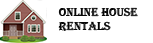
<style>
.page{position:relative;width:153px;height:43px;background:#ffffff}
.page>*{position:absolute;margin:0}
.t1{font:12px "Algerian";color:#070707}
</style>
<div class="page">
<p class="t1" style="left:58px;top:7px;width:80px;height:24px">ONLINE HOUSE <br>RENTALS</p>
</div>
